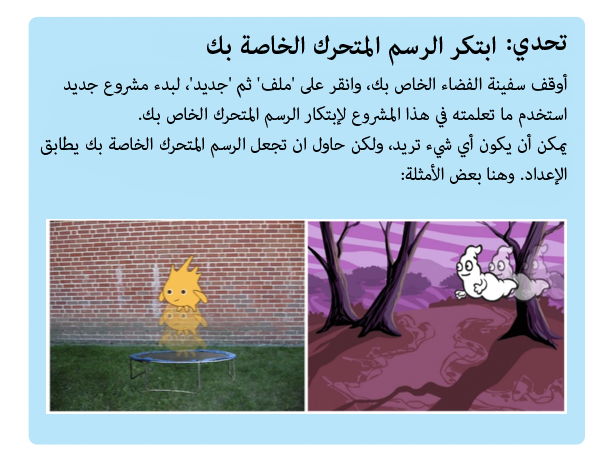
<style>
.page{position:relative;width:616px;height:457px;background:#b8e4f9}
.page>*{position:absolute;margin:0}
.t1{font:36px "AdobeArabic-Bold";color:#000000}
.t2{font:25px "AdobeArabic-Regular";color:#000000}
</style>
<div class="page">
<p class="t1" style="left:207px;top:34px;width:289px;height:32px">ابتكر الرسم المتحرك الخاصة بك</p>
<p class="t1" style="left:507px;top:34px;width:60px;height:28px">تحدي:</p>
<p class="t2" style="left:40px;top:73px;width:528px;height:112px">أوقف سفينة الفضاء الخاص بك، وانقر على 'ملف' ثم 'جديد'، لبدء مشروع جديد <br>استخدم ما تعلمته في هذا المشروع لإبتكار الرسم المتحرك الخاص بك. <br>يمكن أن يكون أي شيء تريد، ولكن حاول ان تجعل الرسم المتحرك الخاصة بك يطابق الإعداد. وهنا بعض الأمثلة:</p>
</div>
